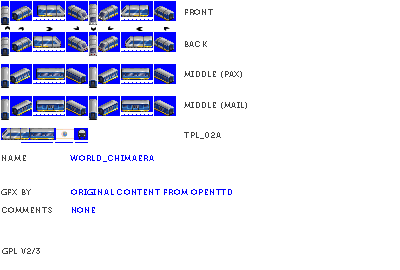
<style>
.page{position:relative;width:400px;height:270px;background:#ffffff}
.page>*{position:absolute;margin:0}
.t1{font:8px "Museo700-Regular";letter-spacing:0.075em;color:#404040;text-transform:uppercase}
.t2{font:8px "Museo700-Regular";letter-spacing:0.075em;color:#0000ff;text-transform:uppercase}
</style>
<div class="page">
<p class="t1" style="left:185px;top:9px;width:28px;height:6px">front</p>
<p class="t1" style="left:185px;top:41px;width:22px;height:6px">back</p>
<p class="t1" style="left:184px;top:71px;width:58px;height:7px">middle (pax)</p>
<p class="t1" style="left:184px;top:102px;width:63px;height:7px">middle (mail)</p>
<p class="t1" style="left:184px;top:132px;width:37px;height:7px">tpl_02a</p>
<p class="t1" style="left:2px;top:155px;width:24px;height:6px">name</p>
<p class="t2" style="left:70px;top:155px;width:84px;height:7px">World_Chimaera</p>
<p class="t1" style="left:1px;top:189px;width:30px;height:6px">gfx by</p>
<p class="t2" style="left:71px;top:189px;width:161px;height:6px">original content from openttd</p>
<p class="t1" style="left:2px;top:207px;width:50px;height:6px">comments</p>
<p class="t2" style="left:72px;top:207px;width:23px;height:6px">none</p>
<p class="t1" style="left:2px;top:248px;width:38px;height:6px">gpl v2/3</p>
</div>
